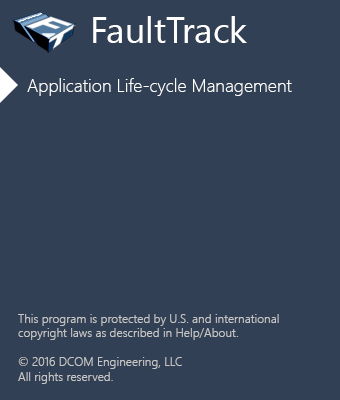
<style>
.page{position:relative;width:340px;height:400px;background:#324055}
.page>*{position:absolute;margin:0}
.t1{font:36px "SegoeUI";color:#ffffff}
.t2{font:18px "SegoeUI-Light";color:#ffffff}
.t3{font:12px "SegoeUI-Semilight";color:#c6c6c6}
</style>
<div class="page">
<p class="t1" style="left:93px;top:16px;width:154px;height:27px">FaultTrack</p>
<p class="t2" style="left:27px;top:78px;width:265px;height:18px">Application Life-cycle Management</p>
<p class="t3" style="left:18px;top:314px;width:261px;height:70px">This program is protected by U.S. and international <br>copyright laws as described in Help/About.<br><br>© 2016 DCOM Engineering, LLC<br>All rights reserved.</p>
</div>
